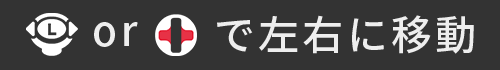
<style>
.page{position:relative;width:500px;height:70px;background:#333333}
.page>*{position:absolute;margin:0}
.t1{font:41px "SourceHanSansJP-Medium";letter-spacing:0.08em;color:#eeeeee}
</style>
<div class="page">
<p class="t1" style="left:217px;top:15px;width:257px;height:39px">で左右に移動</p>
<p class="t1" style="left:94px;top:22px;width:44px;height:25px">or</p>
</div>
